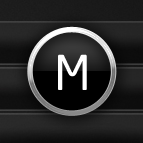
<style>
.page{position:relative;width:143px;height:143px}
.page>*{position:absolute;margin:0}
.t1{font:47.2px "NeoSansIntel";color:#ffffff}
</style>
<div class="page">
<p class="t1" style="left:58px;top:54px;width:29px;height:36px">M</p>
</div>
